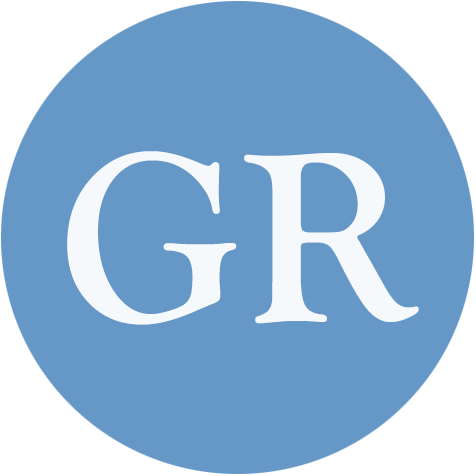
<style>
.page{position:relative;width:476px;height:476px;background:#6598c7}
.page>*{position:absolute;margin:0}
.t1{font:250px "GoudyOldStyleT-Bold";color:#f6f9fc}
</style>
<div class="page">
<p class="t1" style="left:67px;top:151px;width:352px;height:174px">GR</p>
</div>
